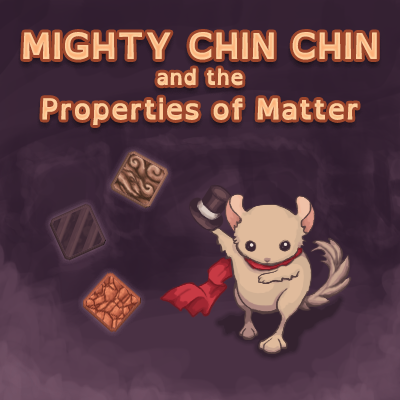
<style>
.page{position:relative;width:400px;height:400px}
.page>*{position:absolute;margin:0}
.t1{font:28.8px "OpenDyslexic-Bold";color:#fdcc9a}
.t2{font:36px "OpenDyslexic-Bold";color:#fdcc9a}
.t3{font:21.6px "OpenDyslexic-Bold";color:#fdcc9a}
</style>
<div class="page">
<p class="t1" style="left:23px;top:32px;width:354px;height:93px;text-align:center"><span class="t2">MIGHTY CHIN CHIN<br></span><span class="t3">and the<br></span>Properties of Matter</p>
</div>
